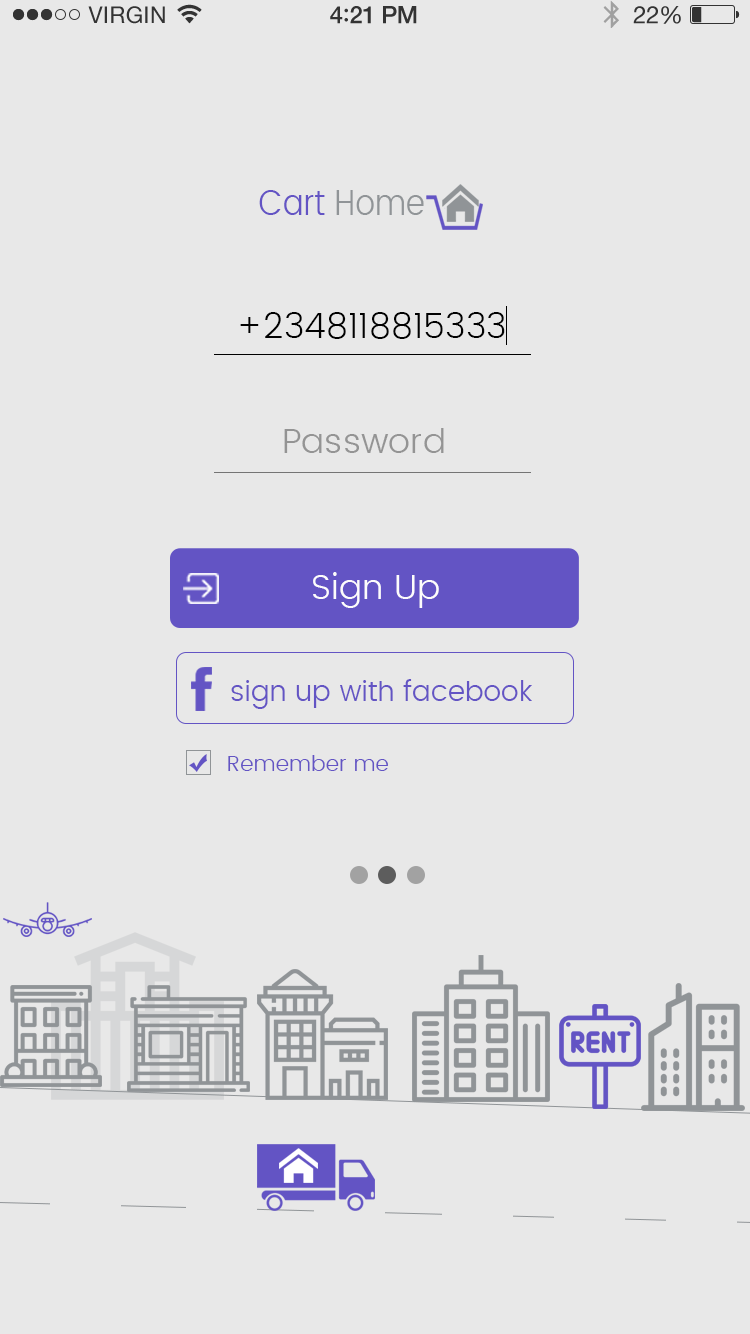
<style>
.page{position:relative;width:750px;height:1334px;background:#e8e8e8}
.page>*{position:absolute;margin:0}
.t1{font:35.8px "Poppins-Light";color:#6354c4;scale:0.87 1}
.t2{font:35.8px "Poppins-Light";color:#909497;scale:0.87 1}
.t3{font:35px "Poppins-Light";color:#010101}
.t4{font:35px "Poppins-Light";color:#949494}
.t5{font:35px "Poppins-Light";color:#fdfcfc}
.t6{font:28.2px "Poppins-Light";color:#6354c4}
.t7{font:22.1px "Poppins-Light";color:#6354c4}
</style>
<div class="page">
<p class="t1" style="left:259px;top:190px;width:165px;height:25px">Cart <span class="t2">Home</span></p>
<p class="t3" style="left:240px;top:312px;width:265px;height:27px">+2348118815333</p>
<p class="t4" style="left:284px;top:428px;width:160px;height:25px">Password</p>
<p class="t5" style="left:313px;top:572px;width:126px;height:36px">Sign Up</p>
<p class="t6" style="left:231px;top:679px;width:301px;height:30px">sign up with facebook</p>
<p class="t7" style="left:228px;top:755px;width:160px;height:16px">Remember me</p>
</div>
